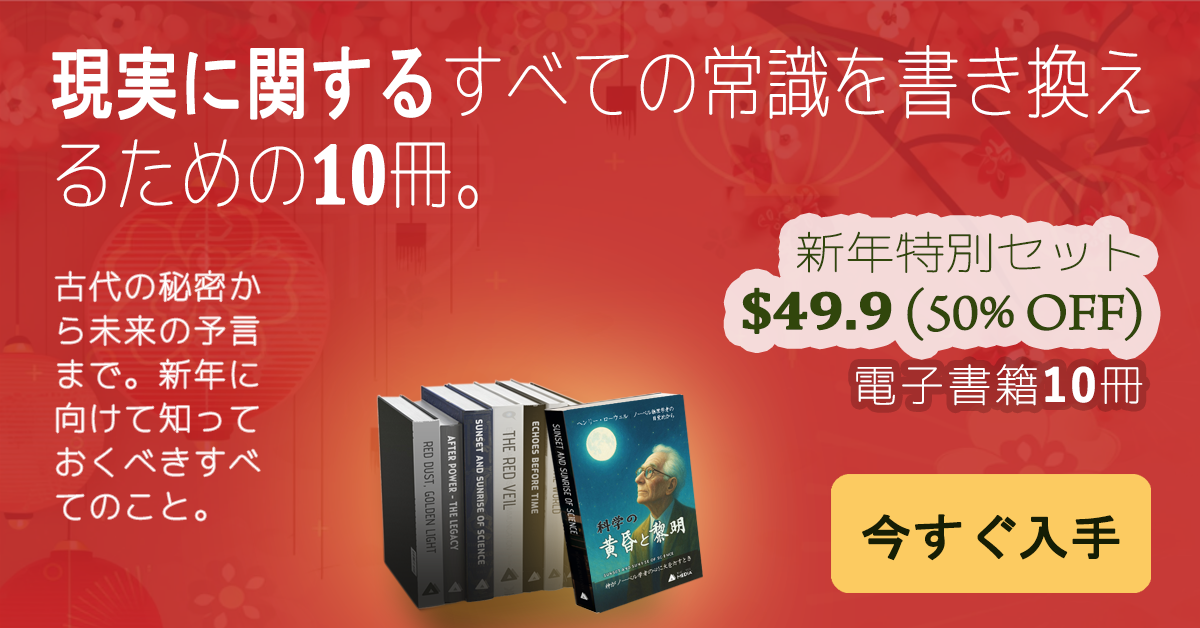
<style>
.page{position:relative;width:1200px;height:628px}
.page>*{position:absolute;margin:0}
.t1{font:79.2px/92px "Chogokuboso-Gothic";color:#ffffff;font-weight:bold;scale:0.8 1}
.t2{font:79.2px/92px "MS-Gothic";color:#ffffff;font-weight:bold;scale:0.8 1}
.t3{font:86.4px/92px "Cambria-Bold";color:#ffffff;font-weight:bold;scale:0.73 1}
.t4{font:54px/60px "ArnoPro-LightDisplay";letter-spacing:-0.025em;color:#31460c;font-weight:bold;scale:1.11 1}
.t5{font:45px/60px "Chogokuboso-Gothic";letter-spacing:-0.025em;color:#31460c;font-weight:bold;scale:1.11 1}
.t6{font:54px/60px "Cambria-Bold";letter-spacing:-0.025em;color:#31460c;font-weight:bold;scale:1.11 1}
.t7{font:32.4px/44px "Chogokuboso-Gothic";letter-spacing:0.05em;color:#ffffff;font-weight:bold}
.t8{font:44px "Chogokuboso-Gothic";letter-spacing:0.05em;color:#ffffff;font-weight:bold}
.t9{font:44px "YuGothic-Bold";letter-spacing:0.05em;color:#ffffff;font-weight:bold}
.t10{font:49.5px "MS-Gothic";letter-spacing:-0.025em;color:#151e05;font-weight:bold;scale:1.06 1}
</style>
<div class="page">
<p class="t1" style="left:52px;top:44px;width:1098px;height:165px"><span class="t2">現実に関する</span>すべての常識を書き換えるための<span class="t3">10</span>冊。</p>
<p class="t4" style="left:742px;top:231px;width:400px;height:110px;text-align:right"><span class="t5">新年特別セット<br></span><span class="t6">$49.9</span> (50% OFF)</p>
<p class="t7" style="left:55px;top:270px;width:205px;height:251px">古代の秘密から未来の予言まで。新年に向けて知っておくべきすべてのこと。</p>
<p class="t8" style="left:856px;top:364px;width:287px;height:42px">電子書籍<span class="t9">10</span>冊</p>
<p class="t10" style="left:862px;top:514px;width:258px;height:47px">今すぐ入手</p>
</div>
